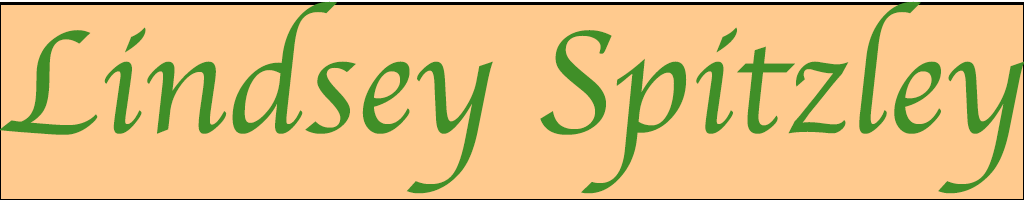
<style>
.page{position:relative;width:1024px;height:200px;background:#ffca8e}
.page>*{position:absolute;margin:0}
.t1{font:150px "Apple-Chancery";color:#408f28}
</style>
<div class="page">
<p class="t1" style="left:0px;top:1px;width:1025px;height:193px">Lindsey Spitzley</p>
</div>
